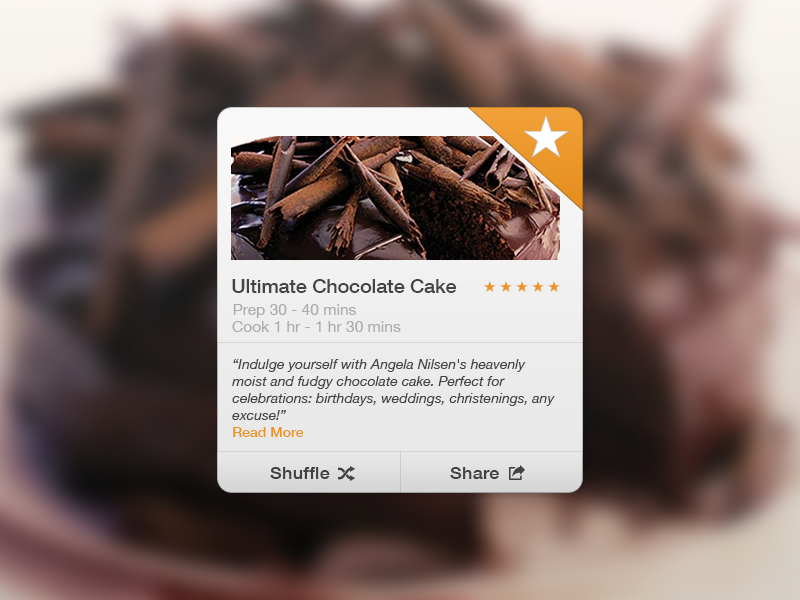
<style>
.page{position:relative;width:800px;height:600px}
.page>*{position:absolute;margin:0}
.t1{font:18.7px "HelveticaNeue-Medium";color:#444444;scale:1.05 1}
.t2{font:14.9px "HelveticaNeue";color:#acacac;scale:1.04 1}
.t3{font:14px "HelveticaNeue-Italic";color:#444444}
.t4{font:14px "HelveticaNeue-Medium";color:#e99427}
.t5{font:17.2px "HelveticaNeue-Medium";letter-spacing:0.025em;color:#444444;scale:1.03 1}
</style>
<div class="page">
<p class="t1" style="left:232px;top:279px;width:225px;height:14px">Ultimate Chocolate Cake</p>
<p class="t2" style="left:233px;top:304px;width:123px;height:14px">Prep 30 - 40 mins</p>
<p class="t2" style="left:232px;top:321px;width:169px;height:11px">Cook 1 hr - 1 hr 30 mins</p>
<p class="t3" style="left:232px;top:359px;width:323px;height:78px">“Indulge yourself with Angela Nilsen's heavenly moist and fudgy chocolate cake. Perfect for celebrations: birthdays, weddings, christenings, any excuse!”<br><span class="t4">Read More</span></p>
<p class="t5" style="left:270px;top:467px;width:60px;height:12px">Shuffle</p>
<p class="t5" style="left:450px;top:467px;width:49px;height:12px">Share</p>
</div>
